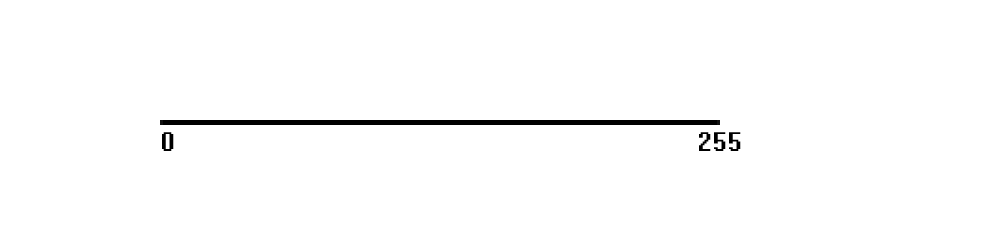
<style>
.page{position:relative;width:1000px;height:250px;background:#ffffff}
.page>*{position:absolute;margin:0}
.t1{font:30px "System";color:#000000}
</style>
<div class="page">
<p class="t1" style="left:162px;top:132px;width:12px;height:19px">0</p>
<p class="t1" style="left:699px;top:132px;width:42px;height:19px">255</p>
</div>
